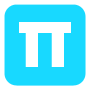
<style>
.page{position:relative;width:90px;height:90px;background:#18d9ff}
.page>*{position:absolute;margin:0}
.t1{font:60px "Futura-CondensedExtraBold";color:#ffffff}
</style>
<div class="page">
<p class="t1" style="left:19px;top:22px;width:52px;height:45px">TT</p>
</div>
